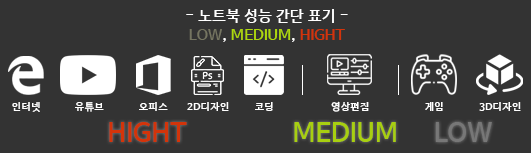
<style>
.page{position:relative;width:531px;height:153px;background:#333333}
.page>*{position:absolute;margin:0}
.t1{font:15px/18.8px "HanSantteutDotumBold";color:#ffffff}
.t2{font:15px/18.8px "HanSantteutDotumBold";color:#757561}
.t3{font:15px/18.8px "HanSantteutDotumBold";color:#aed70d}
.t4{font:15px/18.8px "HanSantteutDotumBold";color:#d3340a}
.t5{font:10.4px "HanSantteutDotumBold";color:#ffffff}
.t6{font:26.2px "HanSantteutDotumBold";color:#d3340a}
.t7{font:26.2px "HanSantteutDotumBold";color:#a8cf10}
.t8{font:26.2px "HanSantteutDotumBold";color:#777777}
</style>
<div class="page">
<p class="t1" style="left:186px;top:9px;width:162px;height:33px;text-align:center">- 노트북 성능 간단 표기 -<br><span class="t2">LOW</span>, <span class="t3">MEDIUM</span>, <span class="t4">HIGHT</span></p>
<p class="t5" style="left:12px;top:102px;width:28px;height:10px">인터넷</p>
<p class="t5" style="left:75px;top:102px;width:29px;height:10px">유튜브</p>
<p class="t5" style="left:139px;top:102px;width:29px;height:9px">오피스</p>
<p class="t5" style="left:187px;top:102px;width:42px;height:9px">2D디자인</p>
<p class="t5" style="left:255px;top:102px;width:18px;height:9px">코딩</p>
<p class="t5" style="left:331px;top:101px;width:38px;height:11px">영상편집</p>
<p class="t5" style="left:425px;top:102px;width:18px;height:9px">게임</p>
<p class="t5" style="left:479px;top:102px;width:42px;height:9px">3D디자인</p>
<p class="t6" style="left:109px;top:122px;width:78px;height:20px">HIGHT</p>
<p class="t7" style="left:294px;top:122px;width:102px;height:20px">MEDIUM</p>
<p class="t8" style="left:435px;top:122px;width:57px;height:20px">LOW</p>
</div>
